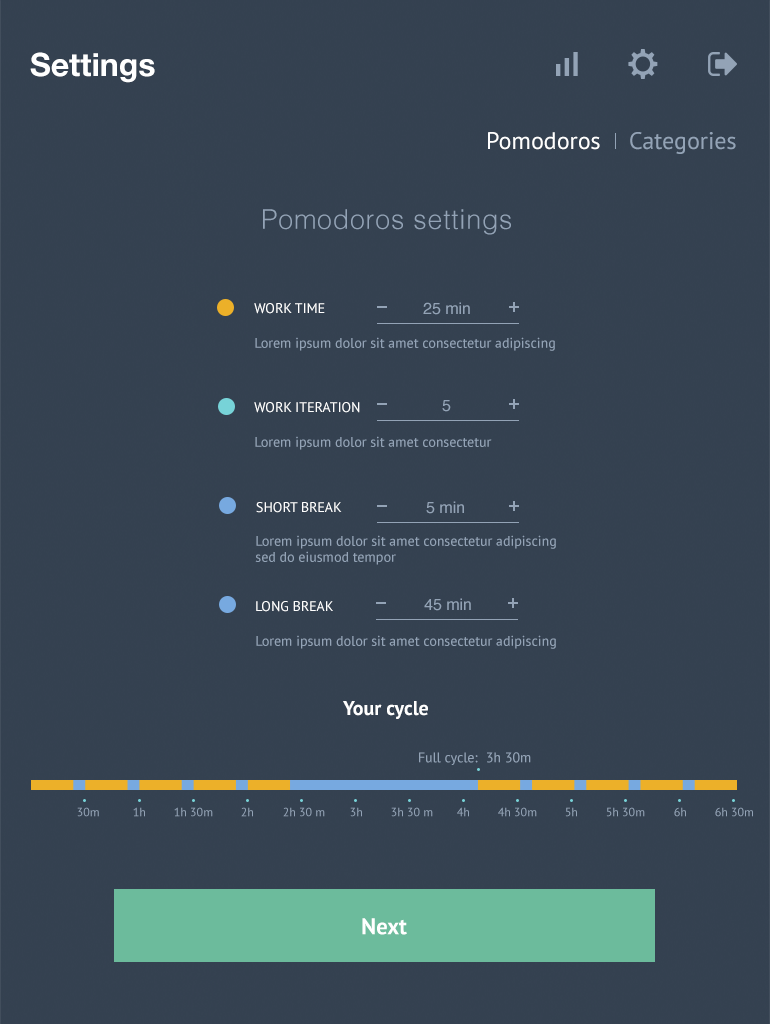
<style>
.page{position:relative;width:770px;height:1024px;background:#344150}
.page>*{position:absolute;margin:0}
.t1{font:32px "HelveticaNeue-Bold";color:#ffffff}
.t2{font:24px "PTSans-Regular";color:#fefefe}
.t3{font:24px "PTSans-Regular";color:#93a3b6}
.t4{font:27px "Helvetica-Light";letter-spacing:0.025em;color:#93a3b6}
.t5{font:14px "PTSans-Regular";color:#ffffff;text-transform:uppercase}
.t6{font:16px "Helvetica";color:#93a3b6}
.t7{font:14px "PTSans-Regular";color:#93a3b6}
.t8{font:14px/16px "PTSans-Regular";color:#93a3b6}
.t9{font:20px "PTSans-Bold";color:#ffffff}
.t10{font:12px "PTSans-Regular";color:#93a3b6}
.t11{font:22.6px "PTSans-Bold";color:#ffffff}
</style>
<div class="page">
<p class="t1" style="left:30px;top:52px;width:125px;height:31px">Settings</p>
<p class="t2" style="left:488px;top:132px;width:112px;height:18px">Pomodoros</p>
<p class="t3" style="left:630px;top:132px;width:106px;height:22px">Categories</p>
<p class="t4" style="left:263px;top:209px;width:248px;height:26px">Pomodoros settings</p>
<p class="t5" style="left:254px;top:303px;width:71px;height:11px">Work Time</p>
<p class="t6" style="left:423px;top:302px;width:47px;height:13px">25 min</p>
<p class="t7" style="left:255px;top:337px;width:300px;height:14px">Lorem ipsum dolor sit amet consectetur adipiscing</p>
<p class="t6" style="left:442px;top:400px;width:9px;height:12px">5</p>
<p class="t5" style="left:254px;top:402px;width:106px;height:11px">Work Iteration</p>
<p class="t7" style="left:255px;top:436px;width:237px;height:14px">Lorem ipsum dolor sit amet consectetur</p>
<p class="t5" style="left:256px;top:502px;width:86px;height:11px">Short Break</p>
<p class="t6" style="left:426px;top:501px;width:38px;height:13px">5 min</p>
<p class="t8" style="left:255px;top:535px;width:301px;height:30px">Lorem ipsum dolor sit amet consectetur adipiscing sed do eiusmod tempor</p>
<p class="t5" style="left:256px;top:601px;width:77px;height:11px">Long Break</p>
<p class="t6" style="left:424px;top:598px;width:47px;height:13px">45 min</p>
<p class="t7" style="left:256px;top:635px;width:300px;height:14px">Lorem ipsum dolor sit amet consectetur adipiscing</p>
<p class="t9" style="left:343px;top:701px;width:85px;height:18px">Your cycle</p>
<p class="t7" style="left:419px;top:752px;width:59px;height:13px">Full cycle:</p>
<p class="t7" style="left:487px;top:752px;width:44px;height:11px">3h 30m</p>
<p class="t10" style="left:77px;top:807px;width:22px;height:10px">30m</p>
<p class="t10" style="left:133px;top:807px;width:12px;height:10px">1h</p>
<p class="t10" style="left:174px;top:807px;width:39px;height:10px">1h 30m</p>
<p class="t10" style="left:241px;top:807px;width:12px;height:10px">2h</p>
<p class="t10" style="left:283px;top:807px;width:42px;height:10px">2h 30 m</p>
<p class="t10" style="left:350px;top:807px;width:12px;height:10px">3h</p>
<p class="t10" style="left:391px;top:807px;width:42px;height:10px">3h 30 m</p>
<p class="t10" style="left:457px;top:807px;width:12px;height:10px">4h</p>
<p class="t10" style="left:498px;top:807px;width:39px;height:10px">4h 30m</p>
<p class="t10" style="left:565px;top:807px;width:12px;height:10px">5h</p>
<p class="t10" style="left:606px;top:807px;width:39px;height:10px">5h 30m</p>
<p class="t10" style="left:674px;top:807px;width:12px;height:10px">6h</p>
<p class="t10" style="left:715px;top:807px;width:38px;height:10px">6h 30m</p>
<p class="t11" style="left:362px;top:918px;width:45px;height:17px">Next</p>
</div>
